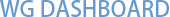
<style>
.page{position:relative;width:170px;height:17px;background:#ffffff}
.page>*{position:absolute;margin:0}
.t1{font:22px "KozGoPro-Medium";color:#6699cc}
</style>
<div class="page">
<p class="t1" style="left:0px;top:0px;width:169px;height:17px">WG DASHBOARD</p>
</div>
